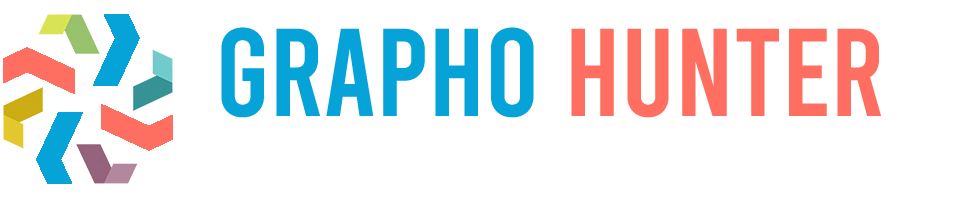
<style>
.page{position:relative;width:960px;height:200px;background:#ffffff}
.page>*{position:absolute;margin:0}
.t1{font:124.4px "Bebas-Regular";color:#06a3da}
.t2{font:124.4px "Bebas-Regular";color:#ff6f61}
</style>
<div class="page">
<p class="t1" style="left:221px;top:27px;width:660px;height:91px">GRAPHO <span class="t2">HUNTER</span></p>
</div>
